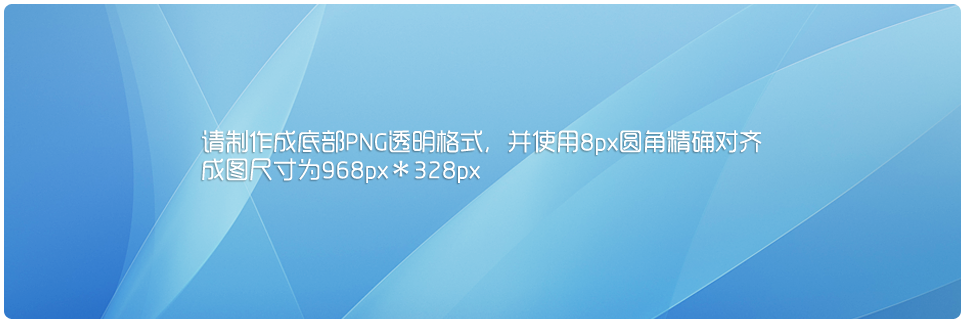
<style>
.page{position:relative;width:968px;height:328px}
.page>*{position:absolute;margin:0}
.t1{font:24px/28px "RTWSYueGoTrial-Regular";color:#ffffff}
.t2{font:24px/28px "AdobeHeitiStd-Regular";color:#ffffff}
</style>
<div class="page">
<p class="t1" style="left:202px;top:130px;width:560px;height:53px">请制作成底部PNG透明格式，并使用8px圆角精确对齐<br>成图尺寸为968px<span class="t2">＊</span>328px</p>
</div>
